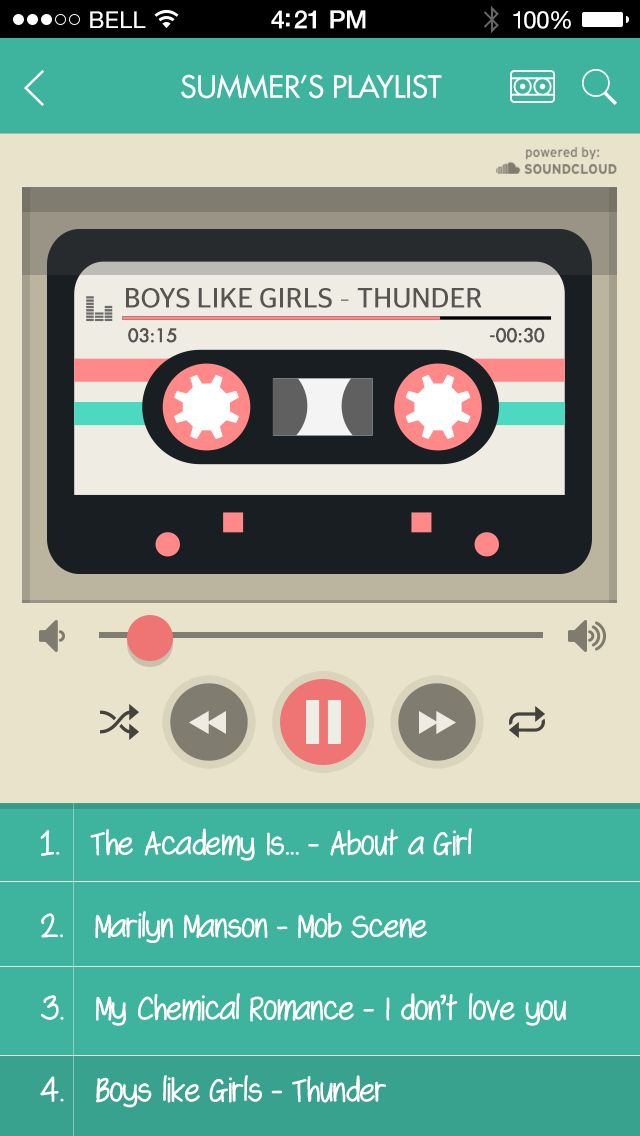
<style>
.page{position:relative;width:640px;height:1136px;background:#3eb49e}
.page>*{position:absolute;margin:0}
.t1{font:23px "HelveticaNeue";letter-spacing:0.02em;color:#ffffff}
.t2{font:25px "HelveticaNeue-Medium";letter-spacing:-0.02em;color:#ffffff}
.t3{font:24px "HelveticaNeue";letter-spacing:-0.02em;color:#ffffff}
.t4{font:30px "VNF-Futura";letter-spacing:-0.01em;color:#ffffff}
.t5{font:27.8px "VNFStagSansBook";color:#565550;text-transform:uppercase}
.t6{font:17.7px "VNF-Futura";color:#565550;text-transform:uppercase;font-weight:bold}
.t7{font:18px "VNF-Futura";color:#565550;text-transform:uppercase;font-weight:bold}
.t8{font:36px "Swagger";color:#ffffff}
.t9{font:36px "Swagger";color:#ffffff;text-transform:uppercase}
.t10{font:35.6px "Swagger";color:#ffffff}
.t11{font:35.6px "Swagger";color:#ffffff;text-transform:uppercase}
.t12{font:36.1px "Swagger";color:#ffffff}
.t13{font:36.1px "Swagger";color:#ffffff;text-transform:uppercase}
.t14{font:35.7px "Swagger";color:#ffffff}
.t15{font:35.7px "Swagger";color:#ffffff;text-transform:uppercase}
</style>
<div class="page">
<p class="t1" style="left:90px;top:11px;width:56px;height:17px">BELL</p>
<p class="t2" style="left:271px;top:10px;width:95px;height:19px">4:21 PM</p>
<p class="t3" style="left:513px;top:11px;width:58px;height:18px">100%</p>
<p class="t4" style="left:181px;top:74px;width:261px;height:25px">SUMMER’S PLAYLIST</p>
<p class="t5" style="left:126px;top:288px;width:356px;height:20px">Boys like Girls - Thunder</p>
<p class="t6" style="left:128px;top:328px;width:49px;height:15px">03:15</p>
<p class="t7" style="left:490px;top:327px;width:55px;height:16px">-00:30</p>
<p class="t8" style="left:40px;top:828px;width:432px;height:33px"><span class="t9">1.   T</span>he Academy Is<span class="t9">... - </span>About a Girl</p>
<p class="t10" style="left:41px;top:911px;width:386px;height:32px"><span class="t11">2.   </span>Marilyn Manson - Mob Scene</p>
<p class="t12" style="left:41px;top:993px;width:525px;height:33px"><span class="t13">3.   </span>My Chemical Romance - I don’t love you</p>
<p class="t14" style="left:40px;top:1075px;width:346px;height:33px"><span class="t15">4.   </span>Boys like Girls - Thunder</p>
</div>
